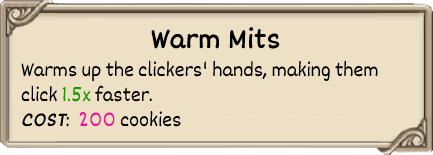
<style>
.page{position:relative;width:433px;height:155px;background:#ede0c4}
.page>*{position:absolute;margin:0}
.t1{font:30px "Dekko";color:#000000;font-weight:bold}
.t2{font:21px "Dekko";color:#000000}
.t3{font:21px "Dekko";color:#1b9902}
.t4{font:21px "Dekko";color:#000000;font-weight:bold;font-style:italic}
.t5{font:21px "Dekko";color:#f0129a}
</style>
<div class="page">
<p class="t1" style="left:151px;top:27px;width:129px;height:22px">Warm Mits</p>
<p class="t2" style="left:21px;top:60px;width:357px;height:67px">Warms up the clickers' hands, making them<br>click <span class="t3">1.5x </span>faster.<br><span class="t4">COST</span>:  <span class="t5">200 </span>cookies</p>
</div>
